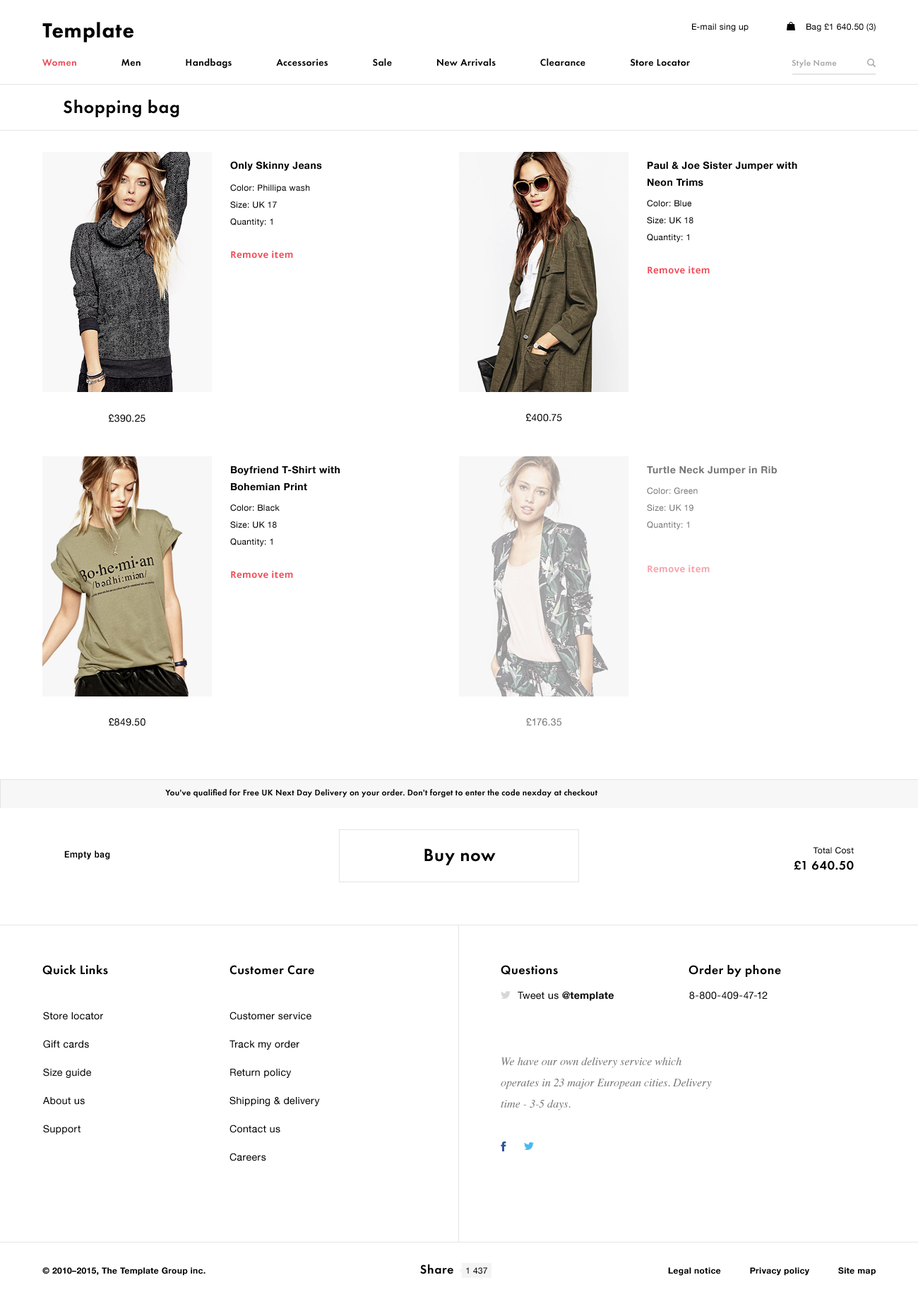
<style>
.page{position:relative;width:918px;height:1299px;background:#ffffff}
.page>*{position:absolute;margin:0}
.t1{font:21.2px "FuturaPT-Heavy";letter-spacing:0.03em;color:#000000}
.t2{font:8.5px "HelveticaNeue";letter-spacing:0.03em;color:#000000}
.t3{font:9.9px "FuturaPT-Demi";letter-spacing:0.03em;color:#000000}
.t4{font:9.9px "FuturaPT-Demi";letter-spacing:0.03em;color:#f14a58}
.t5{font:8.5px "FuturaPT-Demi";letter-spacing:0.03em;color:#a8a8a8}
.t6{font:18.4px "FuturaPT-Demi";letter-spacing:0.03em;color:#000000}
.t7{font:9.9px "HelveticaNeue-Bold";letter-spacing:0.03em;color:#000000}
.t8{font:9.9px/16.9px "HelveticaNeue-Bold";letter-spacing:0.03em;color:#000000}
.t9{font:8.5px/16.9px "HelveticaNeue";letter-spacing:0.03em;color:#000000}
.t10{font:9.2px "OpenSans-Bold";letter-spacing:0.03em;color:#f14a58}
.t11{font:9.9px "HelveticaNeue";letter-spacing:0.03em;color:#000000}
.t12{font:9.9px "HelveticaNeue-Bold";letter-spacing:0.03em;color:#757575}
.t13{font:8.5px/16.9px "HelveticaNeue";letter-spacing:0.03em;color:#757575}
.t14{font:9.2px "OpenSans-Bold";letter-spacing:0.03em;color:#f5a3aa}
.t15{font:9.9px "HelveticaNeue";letter-spacing:0.03em;color:#757575}
.t16{font:8.5px "FuturaPT-Demi";letter-spacing:0.03em;color:#000000}
.t17{font:9.2px "Roboto-Bold";letter-spacing:0.03em;color:#000000}
.t18{font:12.7px "FuturaPT-Demi";letter-spacing:0.03em;color:#000000}
.t19{font:9.9px/28.2px "HelveticaNeue";letter-spacing:0.03em;color:#000000}
.t20{font:11.3px/21.2px "Times-Italic";color:#757575}
.t21{font:8.5px "HelveticaNeue-Bold";letter-spacing:0.03em;color:#000000}
</style>
<div class="page">
<p class="t1" style="left:42px;top:22px;width:91px;height:20px">Template</p>
<p class="t2" style="left:692px;top:23px;width:57px;height:9px">E-mail sing up</p>
<p class="t2" style="left:807px;top:23px;width:69px;height:9px">Bag £1 640.50 (3)</p>
<p class="t3" style="left:42px;top:58px;width:648px;height:11px"><span class="t4">Women</span>                 Men                 Handbags                 Accessories                 Sale                 New Arrivals                 Clearance                 Store Locator</p>
<p class="t5" style="left:792px;top:59px;width:45px;height:9px">Style Name</p>
<p class="t6" style="left:64px;top:100px;width:115px;height:17px">Shopping bag</p>
<p class="t7" style="left:230px;top:161px;width:92px;height:10px">Only Skinny Jeans</p>
<p class="t8" style="left:648px;top:161px;width:149px;height:25px">Paul &amp; Joe Sister Jumper with<br>Neon Trims</p>
<p class="t9" style="left:230px;top:184px;width:80px;height:43px">Color: Phillipa wash<br>Size: UK 17<br>Quantity: 1</p>
<p class="t9" style="left:647px;top:200px;width:47px;height:42px">Color: Blue<br>Size: UK 18<br>Quantity: 1</p>
<p class="t10" style="left:231px;top:251px;width:62px;height:7px">Remove item</p>
<p class="t10" style="left:648px;top:266px;width:62px;height:8px">Remove item</p>
<p class="t11" style="left:109px;top:414px;width:36px;height:8px">£390.25</p>
<p class="t11" style="left:526px;top:413px;width:36px;height:9px">£400.75</p>
<p class="t8" style="left:231px;top:465px;width:109px;height:26px">Boyfriend T-Shirt with<br>Bohemian Print</p>
<p class="t12" style="left:647px;top:466px;width:130px;height:9px">Turtle Neck Jumper in Rib</p>
<p class="t13" style="left:647px;top:487px;width:51px;height:43px">Color: Green<br>Size: UK 19<br>Quantity: 1</p>
<p class="t9" style="left:230px;top:504px;width:50px;height:43px">Color: Black<br>Size: UK 18<br>Quantity: 1</p>
<p class="t14" style="left:648px;top:565px;width:62px;height:8px">Remove item</p>
<p class="t10" style="left:231px;top:571px;width:62px;height:7px">Remove item</p>
<p class="t11" style="left:109px;top:718px;width:36px;height:8px">£849.50</p>
<p class="t15" style="left:526px;top:718px;width:35px;height:8px">£176.35</p>
<p class="t16" style="left:165px;top:789px;width:432px;height:8px">You've qualified for Free UK Next Day Delivery on your order. Don't forget to enter the code nexday at checkout</p>
<p class="t17" style="left:64px;top:850px;width:46px;height:9px">Empty bag</p>
<p class="t6" style="left:424px;top:848px;width:72px;height:17px">Buy now</p>
<p class="t2" style="left:813px;top:847px;width:41px;height:7px">Total Cost</p>
<p class="t18" style="left:794px;top:860px;width:60px;height:10px">£1 640.50</p>
<p class="t18" style="left:42px;top:965px;width:66px;height:10px">Quick Links</p>
<p class="t18" style="left:230px;top:965px;width:84px;height:10px">Customer Care</p>
<p class="t18" style="left:501px;top:965px;width:57px;height:10px">Questions</p>
<p class="t18" style="left:689px;top:965px;width:92px;height:12px">Order by phone</p>
<p class="t7" style="left:518px;top:991px;width:96px;height:10px"><span class="t11">Tweet us </span>@template</p>
<p class="t11" style="left:689px;top:992px;width:79px;height:7px">8-800-409-47-12</p>
<p class="t19" style="left:43px;top:1011px;width:60px;height:123px">Store locator<br>Gift cards<br>Size guide<br>About us<br>Support</p>
<p class="t19" style="left:230px;top:1011px;width:90px;height:150px">Customer service<br>Track my order<br>Return policy<br>Shipping &amp; delivery<br>Contact us<br>Careers</p>
<p class="t20" style="left:501px;top:1057px;width:211px;height:53px">We have our own delivery service which operates in 23 major European cities. Delivery time - 3-5 days.</p>
<p class="t18" style="left:420px;top:1264px;width:33px;height:10px">Share</p>
<p class="t21" style="left:42px;top:1267px;width:164px;height:8px">© 2010–2015, The Template Group inc.</p>
<p class="t2" style="left:466px;top:1267px;width:21px;height:7px">1 437</p>
<p class="t21" style="left:668px;top:1267px;width:208px;height:8px">Legal notice           Privacy policy           Site map</p>
</div>
